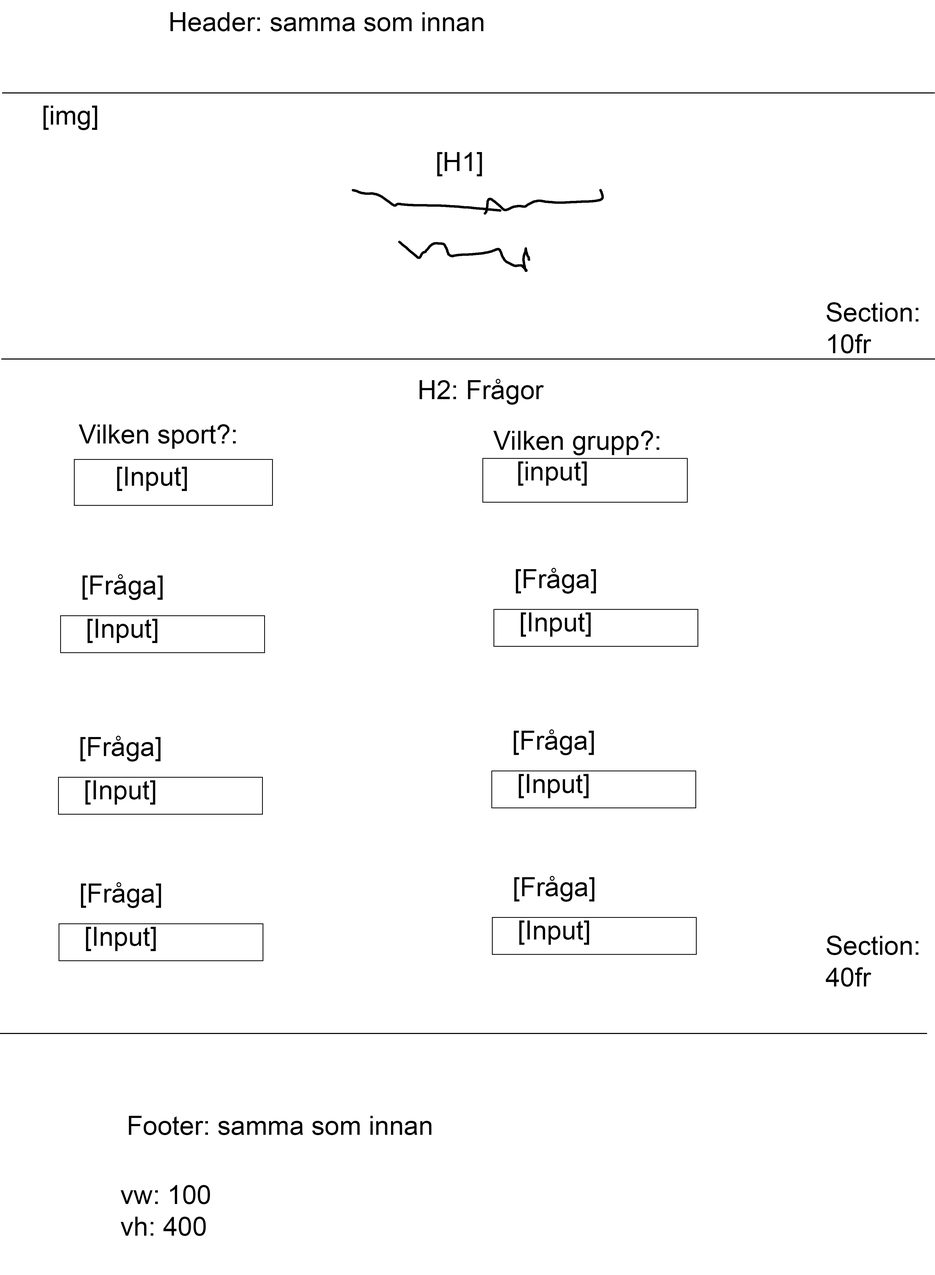
<style>
.page{position:relative;width:935px;height:1275px;background:#ffffff}
.page>*{position:absolute;margin:0}
.t1{font:26.4px "ArialMT";color:#000000}
</style>
<div class="page">
<p class="t1" style="left:171px;top:12px;width:313px;height:19px">Header: samma som innan</p>
<p class="t1" style="left:43px;top:106px;width:54px;height:24px">[img]</p>
<p class="t1" style="left:827px;top:302px;width:92px;height:51px">Section:<br>10fr</p>
<p class="t1" style="left:420px;top:379px;width:124px;height:26px">H2: Frågor</p>
<p class="t1" style="left:79px;top:424px;width:157px;height:25px">Vilken sport?:</p>
<p class="t1" style="left:493px;top:431px;width:166px;height:24px">Vilken grupp?:</p>
<p class="t1" style="left:518px;top:461px;width:69px;height:25px">[input]</p>
<p class="t1" style="left:117px;top:467px;width:70px;height:24px">[Input]</p>
<p class="t1" style="left:516px;top:568px;width:80px;height:26px">[Fråga]</p>
<p class="t1" style="left:82px;top:574px;width:81px;height:26px">[Fråga]</p>
<p class="t1" style="left:521px;top:612px;width:70px;height:25px">[Input]</p>
<p class="t1" style="left:87px;top:619px;width:71px;height:24px">[Input]</p>
<p class="t1" style="left:80px;top:736px;width:81px;height:26px">[Fråga]</p>
<p class="t1" style="left:514px;top:729px;width:80px;height:26px">[Fråga]</p>
<p class="t1" style="left:519px;top:774px;width:70px;height:24px">[Input]</p>
<p class="t1" style="left:85px;top:780px;width:70px;height:25px">[Input]</p>
<p class="t1" style="left:514px;top:876px;width:81px;height:26px">[Fråga]</p>
<p class="t1" style="left:81px;top:882px;width:80px;height:26px">[Fråga]</p>
<p class="t1" style="left:86px;top:927px;width:70px;height:24px">[Input]</p>
<p class="t1" style="left:519px;top:920px;width:70px;height:25px">[Input]</p>
<p class="t1" style="left:826px;top:936px;width:93px;height:51px">Section:<br>40fr</p>
<p class="t1" style="left:129px;top:1116px;width:303px;height:19px">Footer: samma som innan</p>
<p class="t1" style="left:121px;top:1185px;width:89px;height:51px">vw: 100<br>vh: 400</p>
</div>
